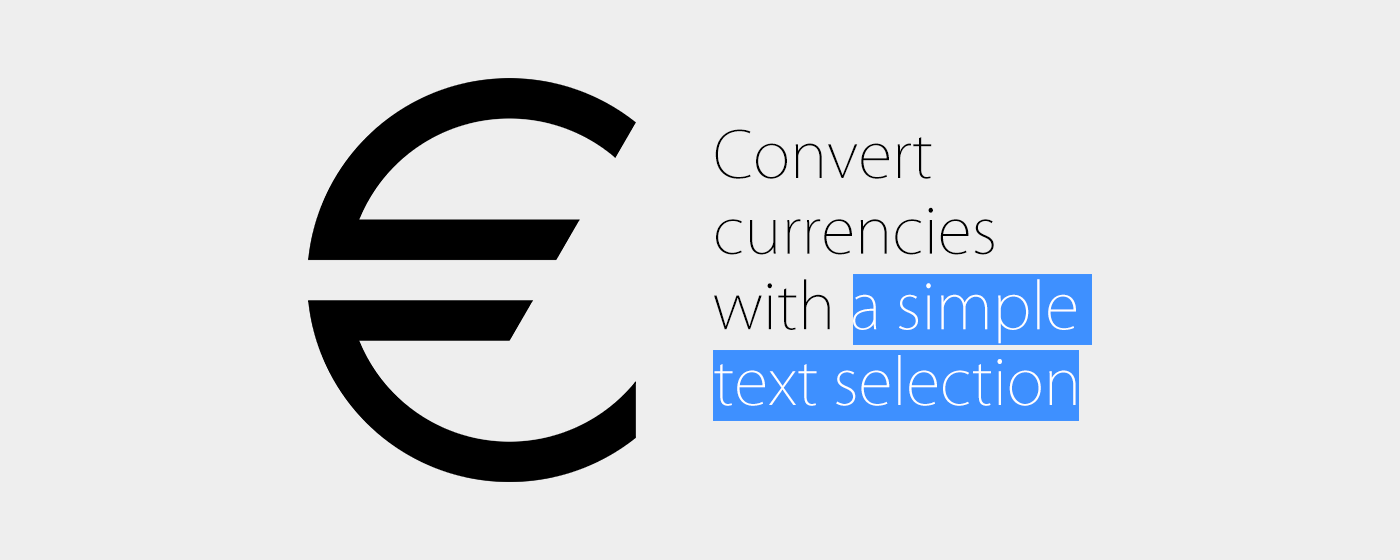
<style>
.page{position:relative;width:1400px;height:560px;background:#eeeeee}
.page>*{position:absolute;margin:0}
.t1{font:63px "KozGoPr6N-ExtraLight";color:#000000}
.t2{font:63px "KozGoPr6N-ExtraLight";color:#ffffff}
</style>
<div class="page">
<p class="t1" style="left:714px;top:129px;width:362px;height:277px;text-align:right">Convert currencies with <span class="t2">a simple text selection</span></p>
</div>
